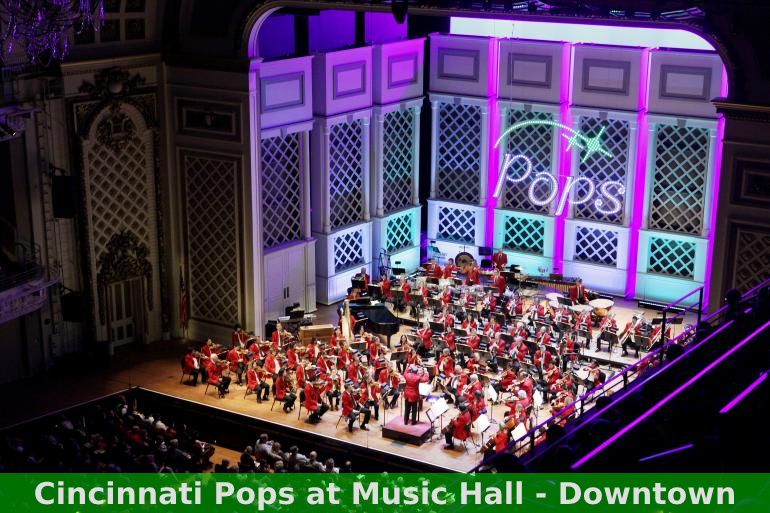
<style>
.page{position:relative;width:770px;height:513px}
.page>*{position:absolute;margin:0}
.t1{font:30px "DejaVuSans-Bold";color:#dedede}
</style>
<div class="page">
<p class="t1" style="left:35px;top:481px;width:699px;height:30px">Cincinnati Pops at Music Hall - Downtown</p>
</div>
